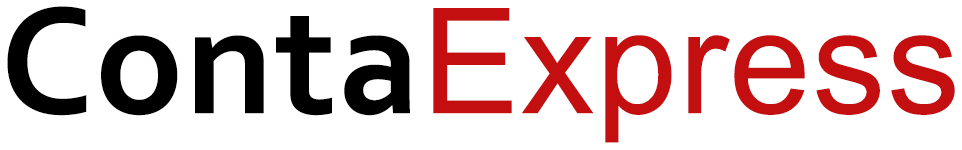
<style>
.page{position:relative;width:962px;height:150px;background:#ffffff}
.page>*{position:absolute;margin:0}
.t1{font:146.7px "ArialMT";letter-spacing:0.01em;color:#c30f0f}
.t2{font:160px "Corbel-Bold";letter-spacing:0.01em;color:#000000}
</style>
<div class="page">
<p class="t1" style="left:7px;top:6px;width:948px;height:137px"><span class="t2">Conta</span>Express</p>
</div>
